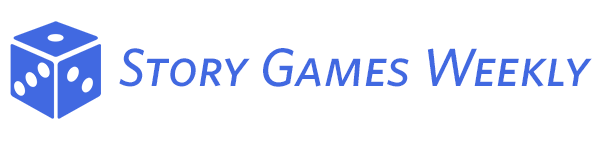
<style>
.page{position:relative;width:600px;height:150px;background:#ffffff}
.page>*{position:absolute;margin:0}
.t1{font:54px "WhitneyHTF-MediumItalicSC";color:#4169e1}
</style>
<div class="page">
<p class="t1" style="left:119px;top:48px;width:473px;height:39px">Story Games Weekly</p>
</div>
